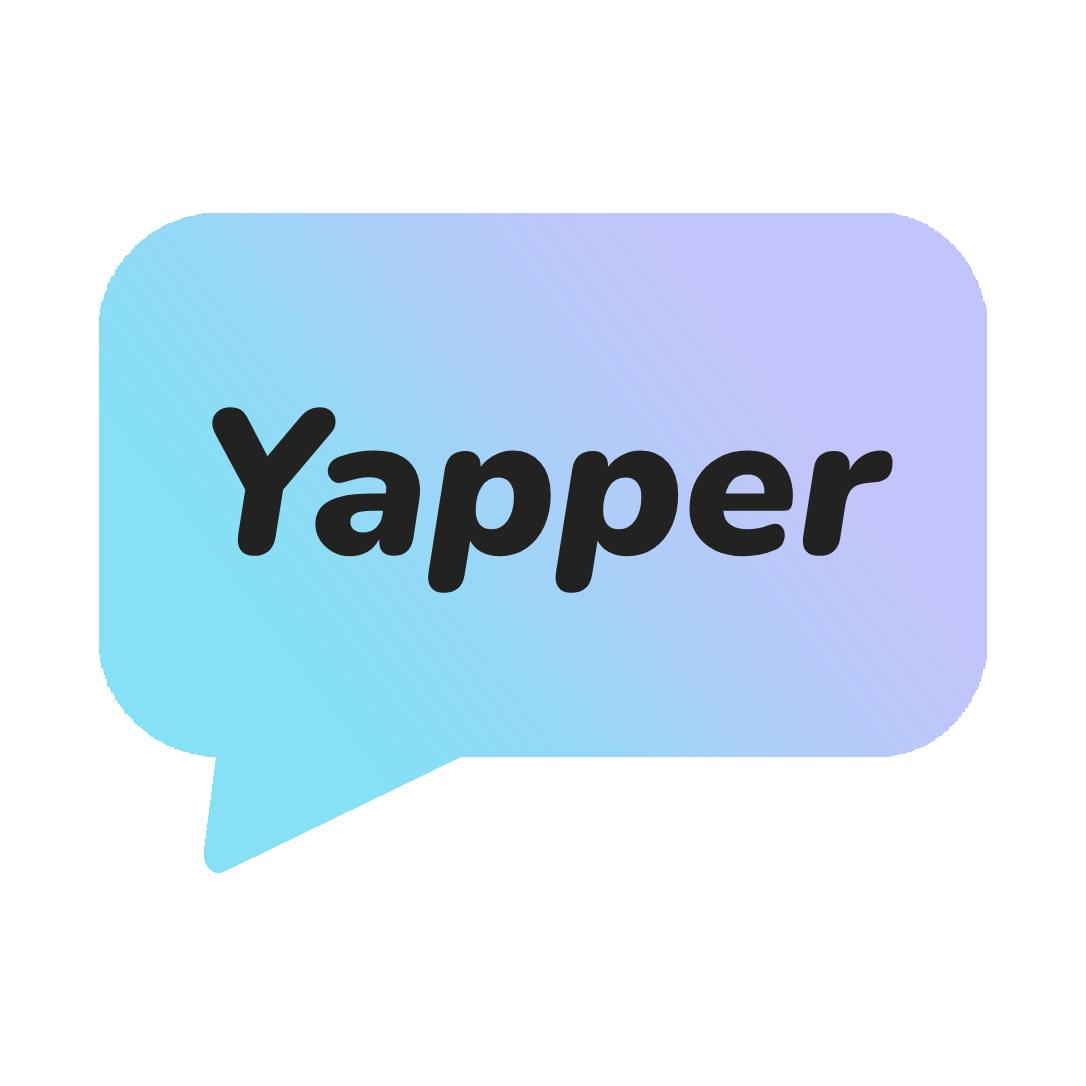
<style>
.page{position:relative;width:1086px;height:1086px;background:#ffffff}
.page>*{position:absolute;margin:0}
.t1{font:205.5px "Nunito-BlackItalic";color:#222221}
</style>
<div class="page">
<p class="t1" style="left:211px;top:407px;width:682px;height:186px">Yapper</p>
</div>
